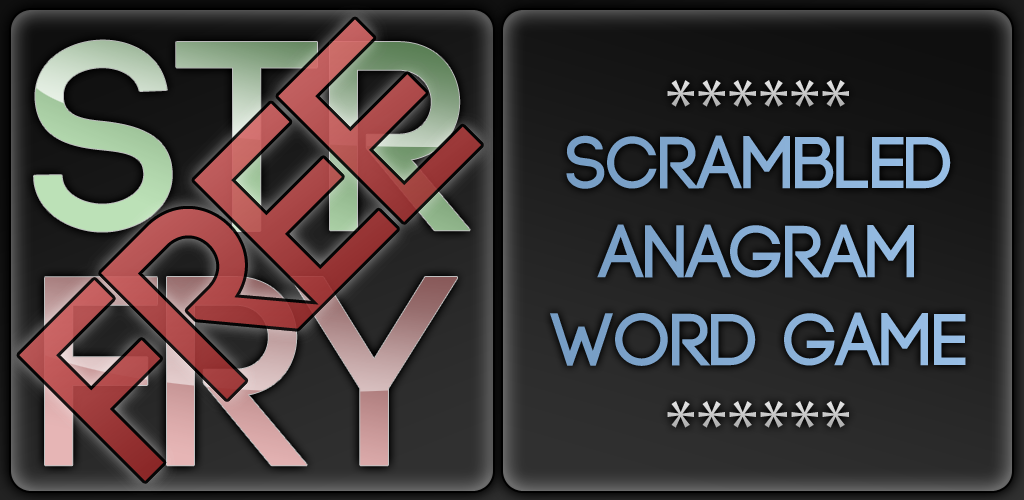
<style>
.page{position:relative;width:1024px;height:500px}
.page>*{position:absolute;margin:0}
.t1{font:268.2px "Code-Bold"}
.t2{font:75px "MyriadPro-Regular";color:#c8c8c8}
.t3{font:73.7px "Code-Bold";color:#88aed5}
</style>
<div class="page">
<p class="t1" style="left:34px;top:40px;width:436px;height:192px">Str</p>
<p class="t2" style="left:667px;top:80px;width:182px;height:27px">******</p>
<p class="t3" style="left:550px;top:135px;width:416px;height:231px;text-align:center">SCrambled<br>anagram<br>word game</p>
<p class="t1" style="left:45px;top:277px;width:412px;height:189px">FRY</p>
<p class="t2" style="left:667px;top:401px;width:182px;height:27px">******</p>
</div>
